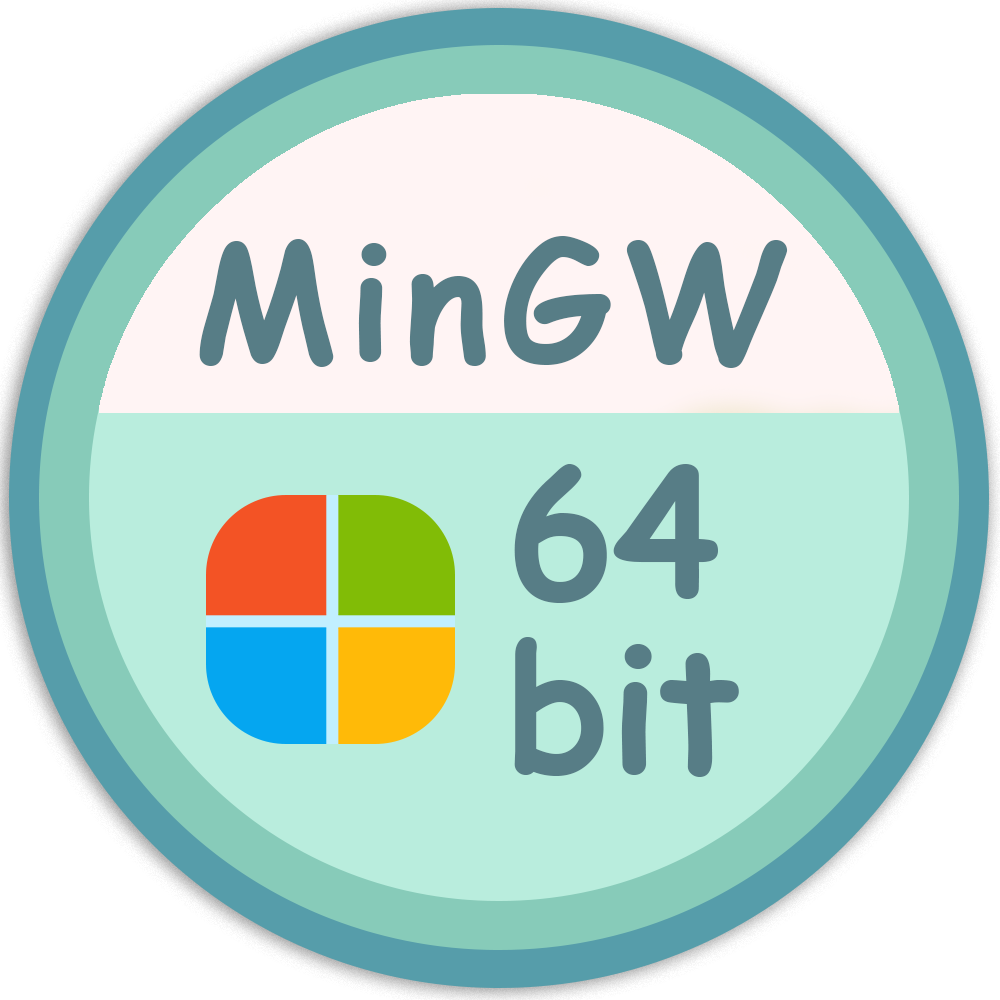
<style>
.page{position:relative;width:1000px;height:1000px;background:#b9eddd}
.page>*{position:absolute;margin:0}
.t1{font:161px "ComicSansMS-Bold";letter-spacing:0.075em;color:#577d86}
.t2{font:174.8px/174.8px "ComicSansMS-Bold";letter-spacing:-0.005em;color:#577d86}
</style>
<div class="page">
<p class="t1" style="left:199px;top:236px;width:589px;height:132px">MinGW</p>
<p class="t2" style="left:514px;top:464px;width:225px;height:313px">64<br>bit</p>
</div>
